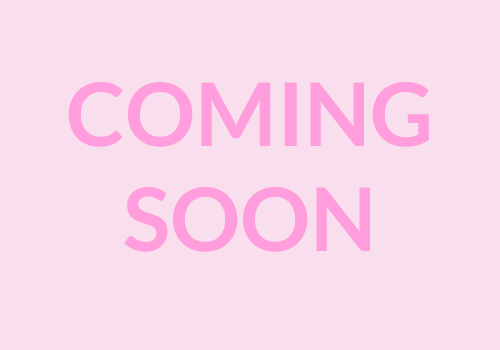
<style>
.page{position:relative;width:500px;height:350px;background:#f9deed}
.page>*{position:absolute;margin:0}
.t1{font:87.7px "Lato-Bold";color:#ff9ddd;text-transform:uppercase}
</style>
<div class="page">
<p class="t1" style="left:68px;top:82px;width:361px;height:170px;text-align:center">coming<br>Soon</p>
<p class="t1" style="left:68px;top:82px;width:361px;height:170px;text-align:center">coming<br>Soon</p>
<p class="t1" style="left:68px;top:82px;width:361px;height:170px;text-align:center">coming<br>Soon</p>
<p class="t1" style="left:68px;top:82px;width:361px;height:170px;text-align:center">coming<br>Soon</p>
</div>
